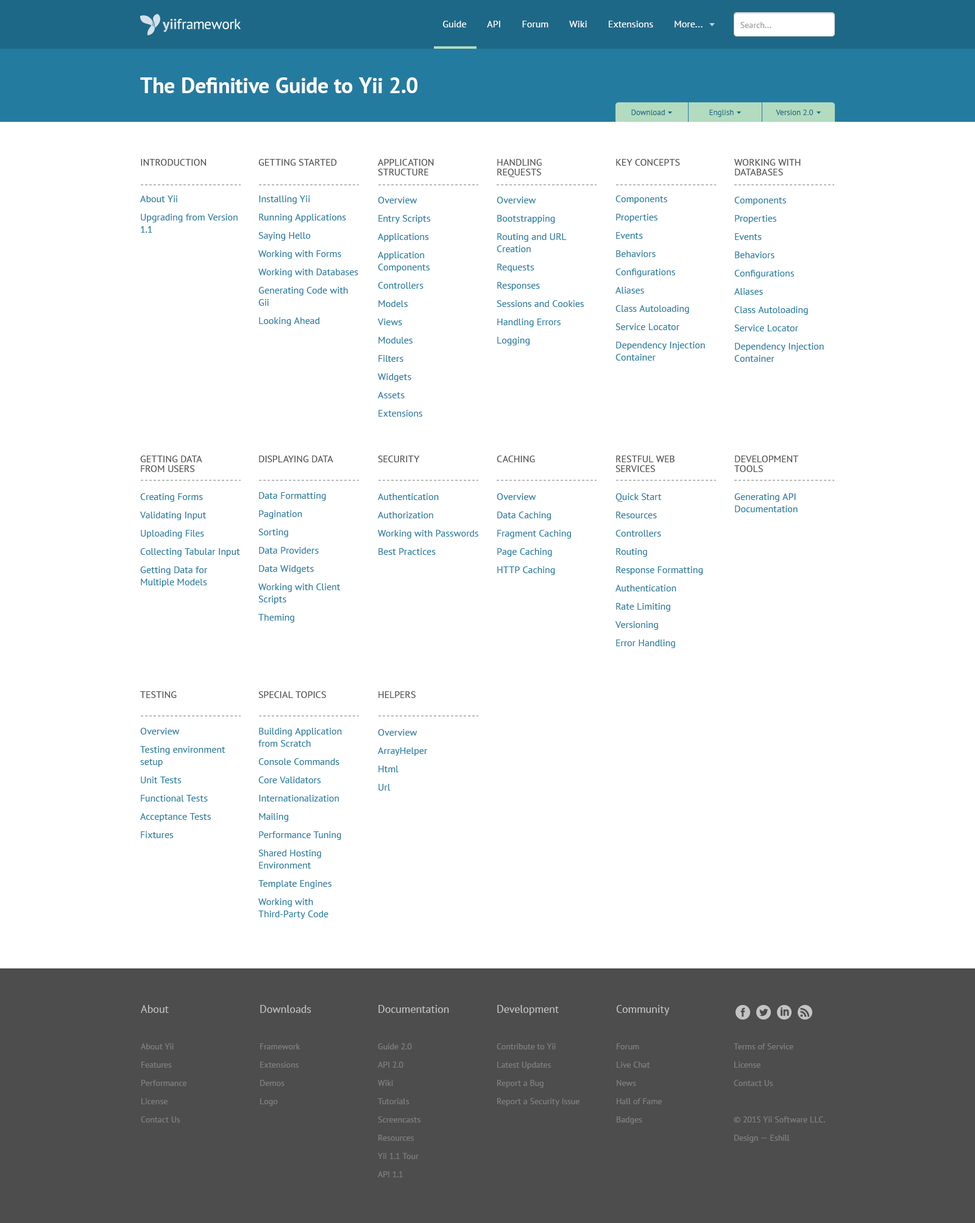
<style>
.page{position:relative;width:975px;height:1223px;background:#ffffff}
.page>*{position:absolute;margin:0}
.t1{font:9.7px "PTSans-Regular";color:#ffffff}
.t2{font:8.5px "PTSans-Regular";color:#999999}
.t3{font:21.9px "PTSans-Bold";color:#ffffff}
.t4{font:7.9px "PTSans-Regular";color:#1e6887}
.t5{font:9.7px/18.3px "PTSans-Regular";color:#247ba0}
.t6{font:9.7px/9.7px "PTSans-Regular";color:#4d4d4d;text-transform:uppercase}
.t7{font:9.7px/12.2px "PTSans-Regular";color:#247ba0}
.t8{font:8.5px/18.3px "PTSans-Regular";color:#808080}
.t9{font:11px/18.3px "PTSans-Regular";color:#c4c4c4}
</style>
<div class="page">
<p class="t1" style="left:443px;top:21px;width:259px;height:6px">Guide        API        Forum        Wiki        Extensions        More...</p>
<p class="t2" style="left:740px;top:22px;width:31px;height:6px">Search...</p>
<p class="t3" style="left:140px;top:77px;width:277px;height:16px">The Definitive Guide to Yii 2.0</p>
<p class="t4" style="left:631px;top:110px;width:34px;height:5px">Download</p>
<p class="t4" style="left:709px;top:110px;width:25px;height:7px">English</p>
<p class="t4" style="left:776px;top:110px;width:37px;height:5px">Version 2.0</p>
<p class="t5" style="left:140px;top:159px;width:98px;height:74px"><span class="t6">Introduction<br><br></span>About Yii<br>Upgrading from Version <br><span class="t7">1.1</span></p>
<p class="t5" style="left:258px;top:159px;width:100px;height:167px"><span class="t6">Getting Started<br><br></span>Installing Yii<br>Running Applications<br>Saying Hello<br>Working with Forms<br>Working with Databases<br>Generating Code with <span class="t7">Gii<br></span>Looking Ahead</p>
<p class="t5" style="left:377px;top:159px;width:57px;height:258px"><span class="t6">Application <br>Structure<br><br></span>Overview<br>Entry Scripts<br>Applications<br>Application <span class="t7">Components<br></span>Controllers<br>Models<br>Views<br>Modules<br>Filters<br>Widgets<br>Assets<br>Extensions</p>
<p class="t5" style="left:497px;top:159px;width:87px;height:186px"><span class="t6">Handling <br>Requests<br><br></span>Overview<br>Bootstrapping<br>Routing and URL <span class="t7">Creation<br></span>Requests<br>Responses<br>Sessions and Cookies<br>Handling Errors<br>Logging</p>
<p class="t5" style="left:615px;top:159px;width:90px;height:202px"><span class="t6">Key Concepts<br><br></span>Components<br>Properties<br>Events<br>Behaviors<br>Configurations<br>Aliases<br>Class Autoloading<br>Service Locator<br>Dependency Injection <br><span class="t7">Container</span></p>
<p class="t5" style="left:734px;top:159px;width:90px;height:203px"><span class="t6">Working with Databases<br><br></span>Components<br>Properties<br>Events<br>Behaviors<br>Configurations<br>Aliases<br>Class Autoloading<br>Service Locator<br>Dependency Injection <br><span class="t7">Container</span></p>
<p class="t5" style="left:140px;top:456px;width:100px;height:131px"><span class="t6">Getting Data <br>from Users<br><br></span>Creating Forms<br>Validating Input<br>Uploading Files<br>Collecting Tabular Input<br>Getting Data for <span class="t7">Multiple Models</span></p>
<p class="t5" style="left:258px;top:456px;width:83px;height:167px"><span class="t6">Displaying Data<br><br></span>Data Formatting<br>Pagination<br>Sorting<br>Data Providers<br>Data Widgets<br>Working with Client <span class="t7">Scripts<br></span>Theming</p>
<p class="t5" style="left:378px;top:456px;width:100px;height:99px"><span class="t6">Security<br><br><br></span>Authentication<br>Authorization<br>Working with Passwords<br>Best Practices</p>
<p class="t5" style="left:497px;top:456px;width:74px;height:119px"><span class="t6">Caching<br><br><br></span>Overview<br>Data Caching<br>Fragment Caching<br>Page Caching<br>HTTP Caching</p>
<p class="t5" style="left:615px;top:456px;width:87px;height:192px"><span class="t6">RESTful Web Services<br><br></span>Quick Start<br>Resources<br>Controllers<br>Routing<br>Response Formatting<br>Authentication<br>Rate Limiting<br>Versioning<br>Error Handling</p>
<p class="t6" style="left:734px;top:456px;width:64px;height:56px">Development<br>Tools<br><br><span class="t5">Generating API <br></span><span class="t7">Documentation</span></p>
<p class="t5" style="left:140px;top:691px;width:85px;height:147px"><span class="t6">Testing<br></span><br>Overview<br>Testing environment <span class="t7">setup<br></span>Unit Tests<br>Functional Tests<br>Acceptance Tests<br>Fixtures</p>
<p class="t5" style="left:258px;top:691px;width:84px;height:228px"><span class="t6">Special Topics<br><br></span>Building Application <span class="t7">from Scratch<br></span>Console Commands<br>Core Validators<br>Internationalization<br>Mailing<br>Performance Tuning<br>Shared Hosting <span class="t7">Environment<br></span>Template Engines<br>Working with <span class="t7">Third-Party Code</span></p>
<p class="t5" style="left:378px;top:691px;width:50px;height:100px"><span class="t6">Helpers<br><br><br></span>Overview<br>ArrayHelper<br>Html<br>Url</p>
<p class="t8" style="left:141px;top:1005px;width:45px;height:118px"><span class="t9">About<br></span><br>About Yii<br>Features<br>Performance<br>License<br>Contact Us</p>
<p class="t8" style="left:260px;top:1005px;width:51px;height:101px"><span class="t9">Downloads<br></span><br>Framework<br>Extensions<br>Demos<br>Logo</p>
<p class="t8" style="left:378px;top:1005px;width:71px;height:173px"><span class="t9">Documentation<br></span><br>Guide 2.0<br>API 2.0<br>Wiki<br>Tutorials<br>Screencasts<br>Resources<br>Yii 1.1 Tour<br>API 1.1</p>
<p class="t8" style="left:497px;top:1005px;width:82px;height:101px"><span class="t9">Development<br></span><br>Contribute to Yii<br>Latest Updates<br>Report a Bug<br>Report a Security Issue</p>
<p class="t8" style="left:616px;top:1005px;width:54px;height:120px"><span class="t9">Community<br></span><br>Forum<br>Live Chat<br>News<br>Hall of Fame<br>Badges</p>
<p class="t8" style="left:734px;top:1044px;width:91px;height:99px">Terms of Service<br>License<br>Contact Us<br><br>© 2015 Yii Software LLC. Design — Eshill</p>
</div>
